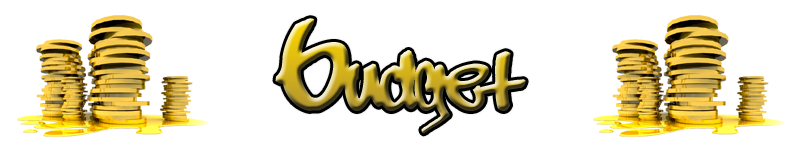
<style>
.page{position:relative;width:800px;height:150px;background:#ffffff}
.page>*{position:absolute;margin:0}
.t1{font:60px "Subway"}
.t2{font:100px "Subway"}
</style>
<div class="page">
<p class="t1" style="left:275px;top:18px;width:251px;height:116px"><span class="t2">b</span>udget</p>
</div>
